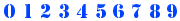
<style>
.page{position:relative;width:180px;height:21px;background:#ffffff}
.page>*{position:absolute;margin:0}
.t1{font:18px "StencilStd";color:#0042ff}
.t2{font:18px "StencilStd";color:#0042fe}
.t3{font:18px "StencilStd";color:#0143ff}
</style>
<div class="page">
<p class="t1" style="left:4px;top:4px;width:11px;height:14px">0</p>
<p class="t2" style="left:25px;top:4px;width:7px;height:14px">1</p>
<p class="t2" style="left:41px;top:4px;width:10px;height:14px">2</p>
<p class="t2" style="left:59px;top:4px;width:10px;height:14px">3</p>
<p class="t1" style="left:76px;top:4px;width:12px;height:14px">4</p>
<p class="t2" style="left:96px;top:4px;width:10px;height:14px">5</p>
<p class="t3" style="left:113px;top:4px;width:11px;height:14px">6</p>
<p class="t2" style="left:132px;top:4px;width:9px;height:14px">7</p>
<p class="t1" style="left:150px;top:4px;width:10px;height:14px">8</p>
<p class="t2" style="left:167px;top:4px;width:10px;height:14px">9</p>
</div>
